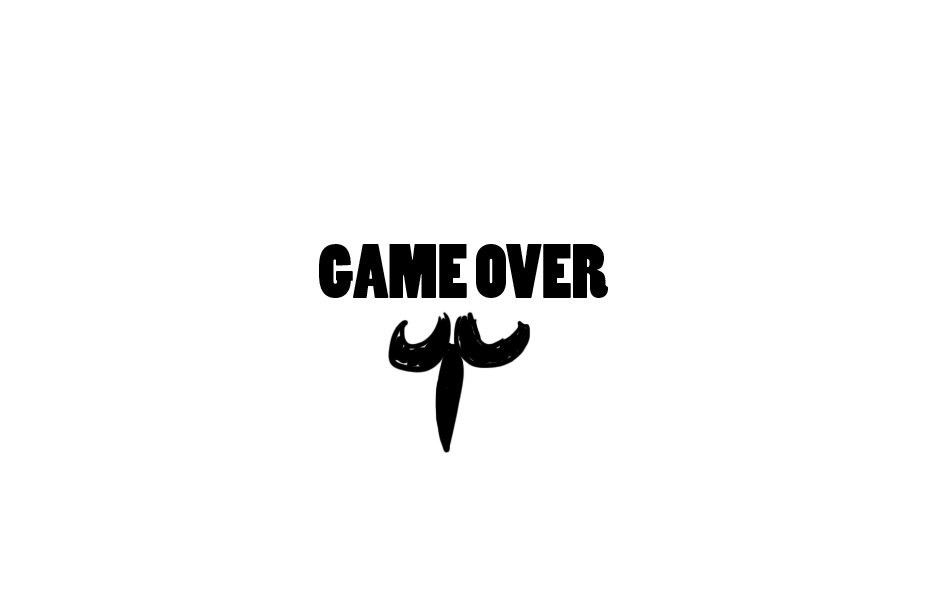
<style>
.page{position:relative;width:928px;height:603px;background:#ffffff}
.page>*{position:absolute;margin:0}
.t1{font:72px "PoplarStd";color:#000000}
</style>
<div class="page">
<p class="t1" style="left:319px;top:244px;width:289px;height:54px">GAME OVER</p>
</div>
